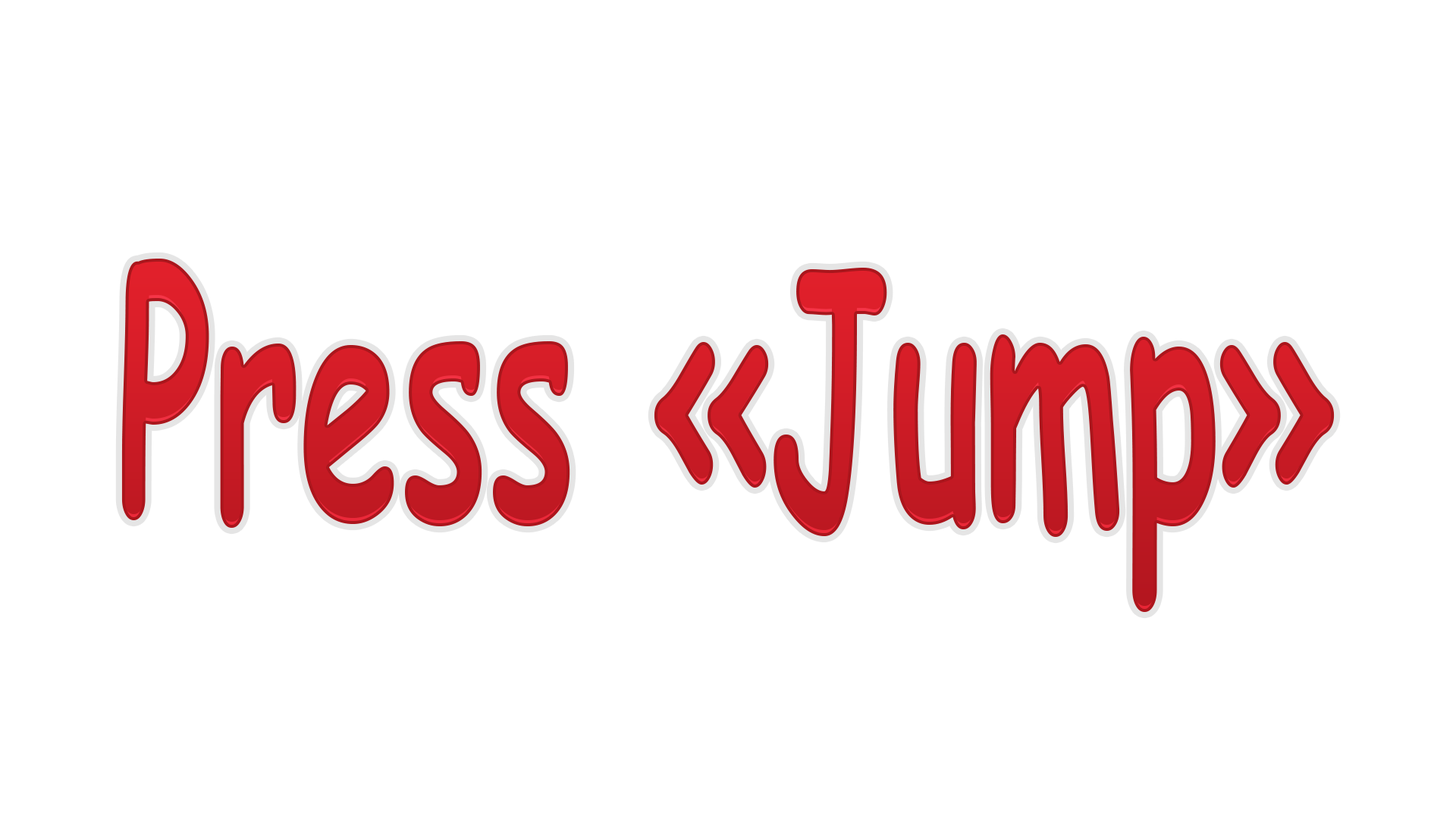
<style>
.page{position:relative;width:1456px;height:819px;background:#ffffff}
.page>*{position:absolute;margin:0}
.t1{font:335.6px "ComicSansMS-Bold";color:#ca1b25;scale:0.54 1}
</style>
<div class="page">
<p class="t1" style="left:121px;top:259px;width:1214px;height:353px">Press «Jump»</p>
</div>
